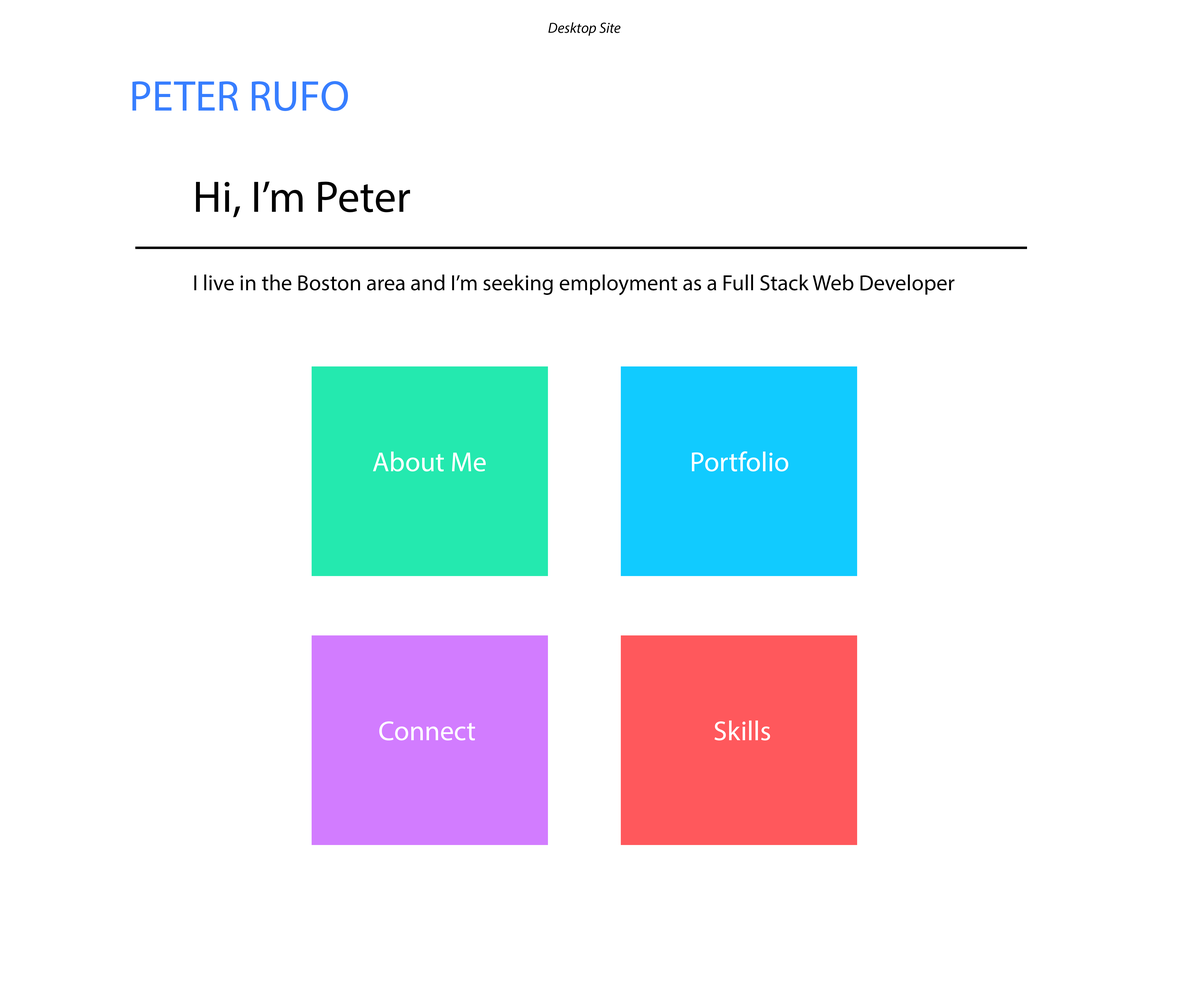
<style>
.page{position:relative;width:1196px;height:997px;background:#ffffff}
.page>*{position:absolute;margin:0}
.t1{font:14.8px "MyriadPro-It";color:#000000}
.t2{font:42.9px "MyriadPro-Regular";color:#377eff}
.t3{font:44.3px "MyriadPro-Regular";color:#000000}
.t4{font:22.2px "MyriadPro-Regular";color:#000000}
.t5{font:27.7px "MyriadPro-Regular";color:#ffffff}
</style>
<div class="page">
<p class="t1" style="left:548px;top:22px;width:73px;height:14px">Desktop Site</p>
<p class="t2" style="left:132px;top:81px;width:216px;height:30px">PETER RUFO</p>
<p class="t3" style="left:196px;top:181px;width:214px;height:36px">Hi, I’m Peter</p>
<p class="t4" style="left:194px;top:274px;width:761px;height:21px">I live in the Boston area and I’m seeking employment as a Full Stack Web Developer</p>
<p class="t5" style="left:373px;top:451px;width:113px;height:21px">About Me</p>
<p class="t5" style="left:692px;top:451px;width:96px;height:20px">Portfolio</p>
<p class="t5" style="left:379px;top:721px;width:96px;height:20px">Connect</p>
<p class="t5" style="left:715px;top:720px;width:55px;height:21px">Skills</p>
</div>
